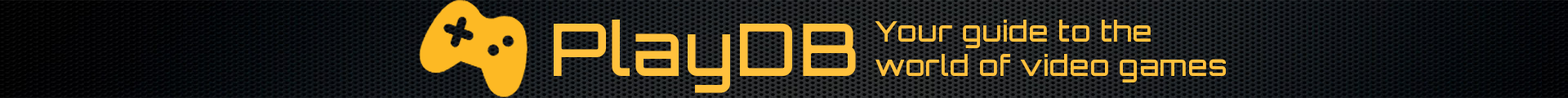
<style>
.page{position:relative;width:1568px;height:98px}
.page>*{position:absolute;margin:0}
.t1{font:72.7px "Orbitron-Medium";letter-spacing:0.025em;color:#ffc13d}
.t2{font:28.6px "Orbitron-Medium";letter-spacing:0.025em;color:#ffc13d}
</style>
<div class="page">
<p class="t1" style="left:554px;top:20px;width:302px;height:73px">PlayDB</p>
<p class="t2" style="left:875px;top:20px;width:351px;height:62px;text-align:right">Your guide to the world of video games</p>
</div>
